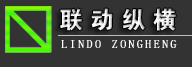
<style>
.page{position:relative;width:192px;height:67px;background:#333333}
.page>*{position:absolute;margin:0}
.t1{font:24px "FZDHTK--GBK1-0";letter-spacing:0.3em}
.t2{font:12px "·ÂËÎ";letter-spacing:0.2em;color:#ffffff;text-transform:uppercase}
</style>
<div class="page">
<p class="t1" style="left:60px;top:8px;width:116px;height:23px">联动纵横</p>
<p class="t2" style="left:61px;top:40px;width:116px;height:8px">lindo zongheng</p>
</div>
